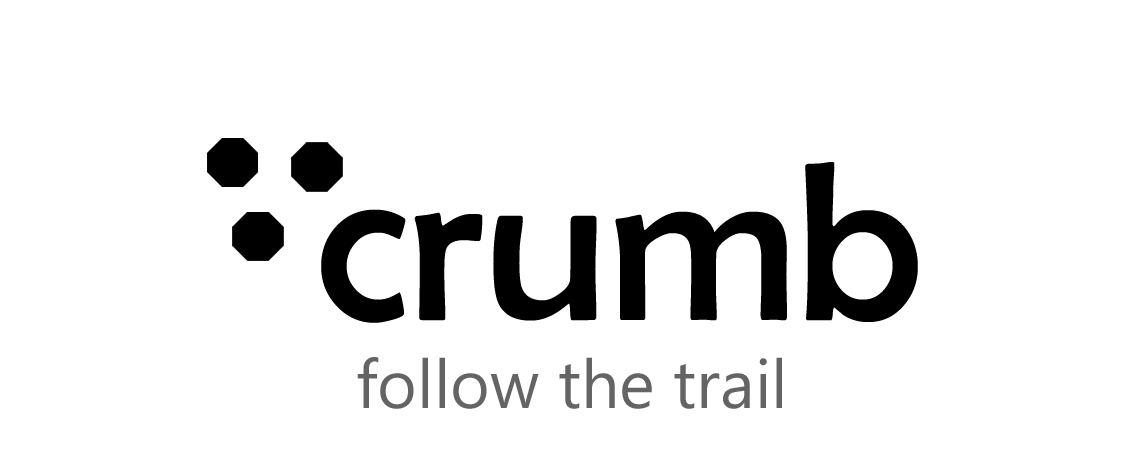
<style>
.page{position:relative;width:1124px;height:460px;background:#ffffff}
.page>*{position:absolute;margin:0}
.t1{font:226px "BerlinSansFB-Reg";color:#000000}
.t2{font:68px "SegoeUI";color:#656464}
</style>
<div class="page">
<p class="t1" style="left:321px;top:161px;width:597px;height:162px">crumb</p>
<p class="t2" style="left:357px;top:357px;width:425px;height:52px">follow the trail</p>
</div>
